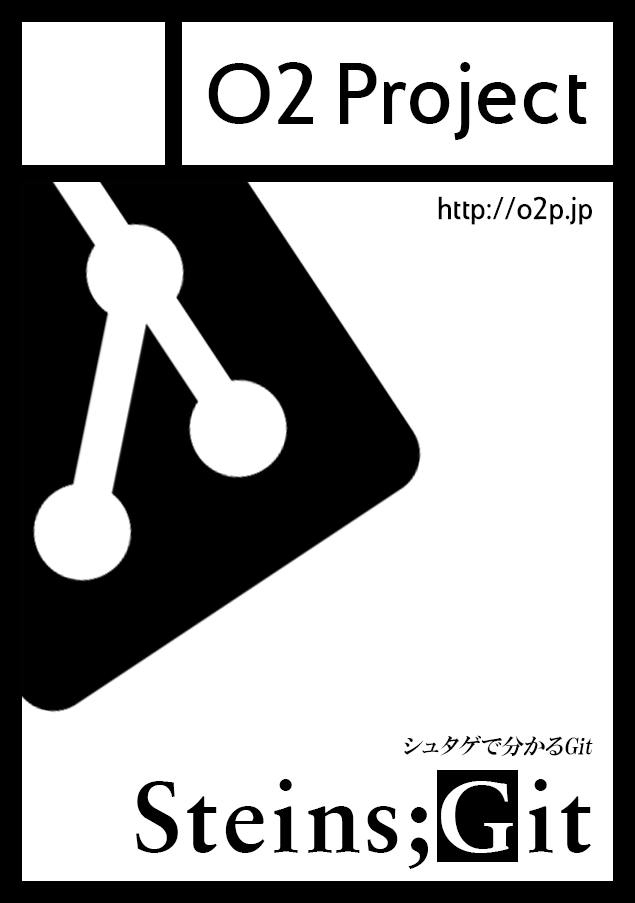
<style>
.page{position:relative;width:635px;height:903px;background:#ffffff}
.page>*{position:absolute;margin:0}
.t1{font:77.8px "COM4tSansMedium";color:#000000}
.t2{font:77.8px "COM4tSansMedium";letter-spacing:0.08em;color:#000000}
.t3{font:77.8px "COM4tSansMedium";letter-spacing:0.06em;color:#000000}
.t4{font:27.8px "COM4tSansMedium";letter-spacing:0.015em;color:#000000}
.t5{font:22.2px "HGPMinchoE";letter-spacing:0.015em;color:#000000;font-style:italic}
.t6{font:100px "SabonBold";letter-spacing:0.06em;color:#000000}
.t7{font:100px "SabonBold";letter-spacing:0.035em;color:#000000}
.t8{font:100px "SabonBold";letter-spacing:0.12em;color:#ffffff}
.t9{font:100px "SabonBold";letter-spacing:0.04em;color:#000000}
</style>
<div class="page">
<p class="t1" style="left:208px;top:62px;width:379px;height:78px">O2 Pr<span class="t2">o</span>j<span class="t3">ec</span>t</p>
<p class="t4" style="left:438px;top:196px;width:154px;height:29px">http://o2p.jp</p>
<p class="t5" style="left:404px;top:735px;width:189px;height:21px">シュタゲで分かるGit</p>
<p class="t6" style="left:136px;top:779px;width:455px;height:90px">Stei<span class="t7">n</span>s;<span class="t8">G</span><span class="t9">i</span>t</p>
</div>
